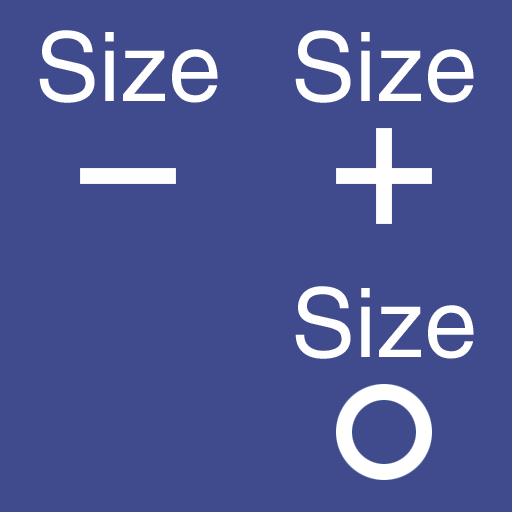
<style>
.page{position:relative;width:512px;height:512px;background:#3f4b8d}
.page>*{position:absolute;margin:0}
.t1{font:96px "Helvetica";color:#ffffff}
</style>
<div class="page">
<p class="t1" style="left:39px;top:30px;width:179px;height:73px">Size</p>
<p class="t1" style="left:295px;top:30px;width:179px;height:73px">Size</p>
<p class="t1" style="left:295px;top:286px;width:179px;height:73px">Size</p>
</div>
